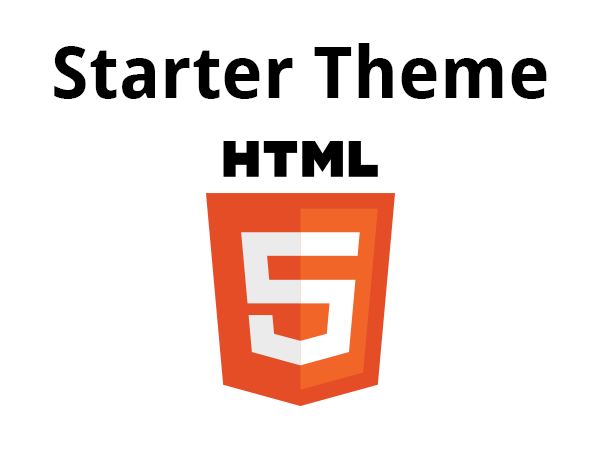
<style>
.page{position:relative;width:600px;height:450px;background:#ffffff}
.page>*{position:absolute;margin:0}
.t1{font:72px "DroidSans-Bold";color:#000000}
</style>
<div class="page">
<p class="t1" style="left:54px;top:43px;width:493px;height:56px">Starter Theme</p>
</div>
